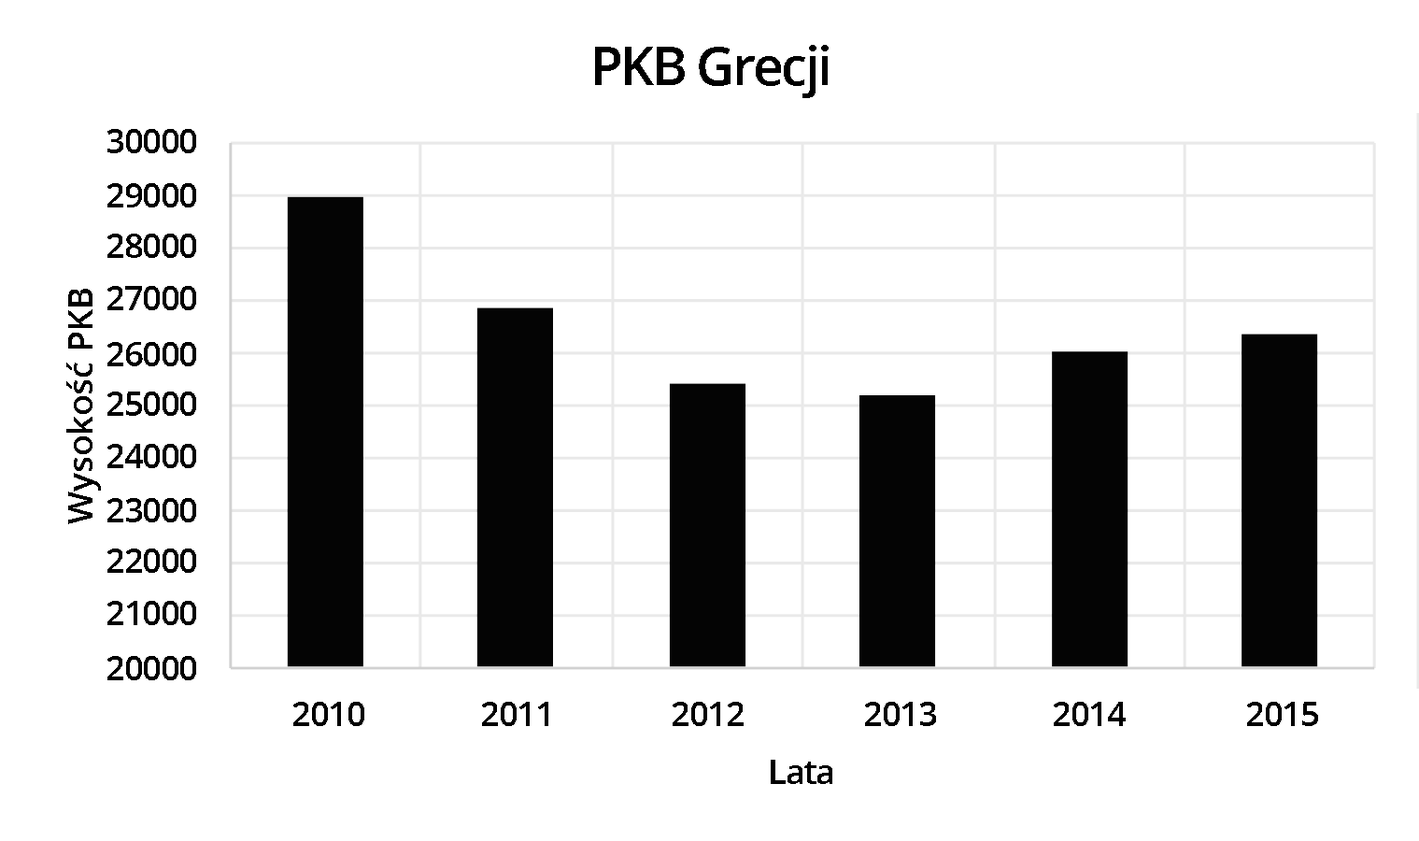
<style>
.page{position:relative;width:1419px;height:841px;background:#ffffff}
.page>*{position:absolute;margin:0}
.t1{font:53.6px "OpenSans-Semibold";letter-spacing:-0.05em;color:#000000}
.t2{font:34.9px "OpenSans-Semibold";letter-spacing:-0.05em;color:#000000}
.t3{font:34.9px "OpenSans-Semibold";letter-spacing:-0.01em;color:#000000}
</style>
<div class="page">
<p class="t1" style="left:595px;top:45px;width:233px;height:53px">PKB Grecji</p>
<p class="t2" style="left:107px;top:129px;width:89px;height:24px">30000</p>
<p class="t2" style="left:107px;top:183px;width:89px;height:24px">29000</p>
<p class="t2" style="left:107px;top:233px;width:89px;height:25px">28000</p>
<p class="t3" style="left:66px;top:289px;width:35px;height:235px;rotate:-90deg">Wysokość PKB</p>
<p class="t2" style="left:107px;top:286px;width:89px;height:24px">27000</p>
<p class="t2" style="left:107px;top:342px;width:89px;height:24px">26000</p>
<p class="t2" style="left:107px;top:391px;width:89px;height:25px">25000</p>
<p class="t2" style="left:107px;top:444px;width:89px;height:24px">24000</p>
<p class="t2" style="left:107px;top:498px;width:89px;height:24px">23000</p>
<p class="t2" style="left:107px;top:548px;width:89px;height:25px">22000</p>
<p class="t2" style="left:107px;top:601px;width:89px;height:24px">21000</p>
<p class="t2" style="left:107px;top:656px;width:89px;height:24px">20000</p>
<p class="t2" style="left:293px;top:701px;width:71px;height:25px">2010</p>
<p class="t2" style="left:482px;top:701px;width:66px;height:25px">2011</p>
<p class="t2" style="left:672px;top:701px;width:71px;height:25px">2012</p>
<p class="t2" style="left:865px;top:701px;width:71px;height:25px">2013</p>
<p class="t2" style="left:1053px;top:701px;width:72px;height:25px">2014</p>
<p class="t2" style="left:1247px;top:701px;width:71px;height:25px">2015</p>
<p class="t2" style="left:770px;top:759px;width:62px;height:25px">Lata</p>
</div>
